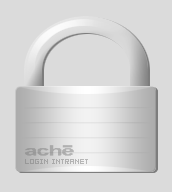
<style>
.page{position:relative;width:172px;height:192px;background:#dbdbdb}
.page>*{position:absolute;margin:0}
.t1{font:8px "04b03b";color:#adadad}
</style>
<div class="page">
<p class="t1" style="left:25px;top:159px;width:63px;height:5px">LOGIN INTRANET</p>
</div>
